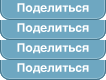
<style>
.page{position:relative;width:106px;height:80px;background:#6ea7c1}
.page>*{position:absolute;margin:0}
.t1{font:12px "Helvetica-Bold";color:#ffffff}
</style>
<div class="page">
<p class="t1" style="left:17px;top:3px;width:72px;height:11px">Поделиться</p>
<p class="t1" style="left:17px;top:23px;width:72px;height:11px">Поделиться</p>
<p class="t1" style="left:17px;top:43px;width:72px;height:11px">Поделиться</p>
<p class="t1" style="left:17px;top:63px;width:72px;height:11px">Поделиться</p>
</div>
